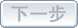
<style>
.page{position:relative;width:78px;height:28px}
.page>*{position:absolute;margin:0}
.t1{font:18px "SimHei";letter-spacing:0.04em;color:#abafb3;font-weight:bold}
</style>
<div class="page">
<p class="t1" style="left:11px;top:5px;width:55px;height:18px">下一步</p>
</div>
